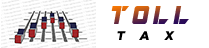
<style>
.page{position:relative;width:209px;height:48px;background:#ffffff}
.page>*{position:absolute;margin:0}
.t1{font:29.2px "ARDESTINE";letter-spacing:0.16em;font-style:italic}
.t2{font:12.5px "Gotham-Black";letter-spacing:1.26em;color:#000000;font-style:italic}
</style>
<div class="page">
<p class="t1" style="left:111px;top:6px;width:78px;height:18px">TOLL</p>
<p class="t2" style="left:117px;top:31px;width:58px;height:9px">TAX</p>
</div>
